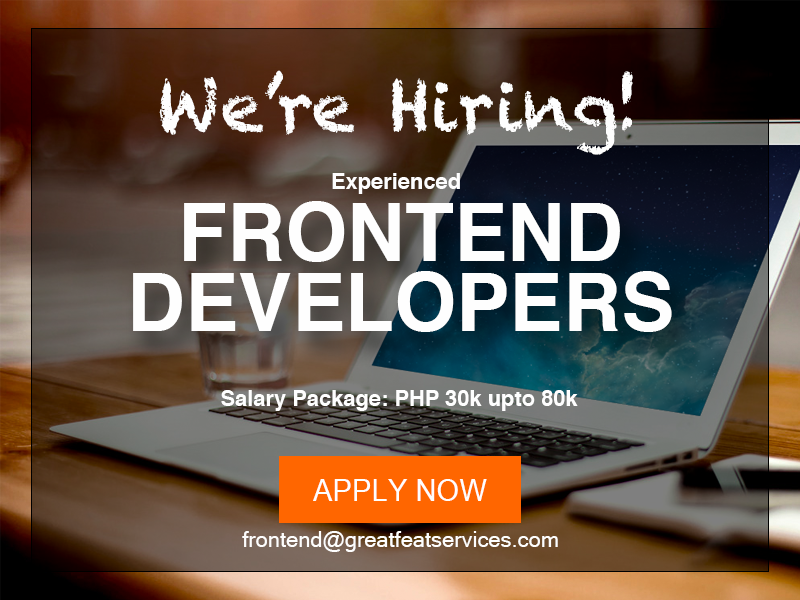
<style>
.page{position:relative;width:800px;height:600px}
.page>*{position:absolute;margin:0}
.t1{font:68.8px "Chalkduster";color:#fefefe}
.t2{font:21.9px "Helvetica-Bold";color:#fefefe}
.t3{font:80.1px/70.5px "Helvetica-Bold";color:#fefefe}
.t4{font:29.8px "MicrosoftSansSerif";color:#fefefe}
.t5{font:21.9px "MicrosoftSansSerif";color:#fefefe}
</style>
<div class="page">
<p class="t1" style="left:159px;top:70px;width:474px;height:85px">We’re Hiring!</p>
<p class="t2" style="left:332px;top:173px;width:128px;height:21px">Experienced</p>
<p class="t3" style="left:133px;top:201px;width:539px;height:131px;text-align:center">FRONTEND<br>DEVELOPERS</p>
<p class="t2" style="left:221px;top:390px;width:357px;height:21px">Salary Package: PHP 30k upto 80k</p>
<p class="t4" style="left:313px;top:479px;width:174px;height:22px">APPLY NOW</p>
<p class="t5" style="left:242px;top:531px;width:316px;height:21px">frontend@greatfeatservices.com</p>
</div>
